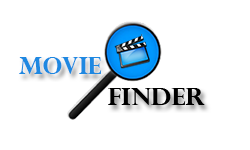
<style>
.page{position:relative;width:250px;height:150px;background:#ffffff}
.page>*{position:absolute;margin:0}
.t1{font:24px "PerpetuaTitlingMT-Bold";color:#1e88e1}
.t2{font:24px "PerpetuaTitlingMT-Bold";color:#000000}
</style>
<div class="page">
<p class="t1" style="left:19px;top:57px;width:83px;height:17px">Movie</p>
<p class="t2" style="left:108px;top:88px;width:97px;height:17px">Finder</p>
</div>
